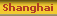
<style>
.page{position:relative;width:57px;height:16px;background:#f3ca30}
.page>*{position:absolute;margin:0}
.t1{font:10px "Verdana-Bold";color:#b23f24}
</style>
<div class="page">
<p class="t1" style="left:3px;top:3px;width:50px;height:10px">Shanghai</p>
</div>
